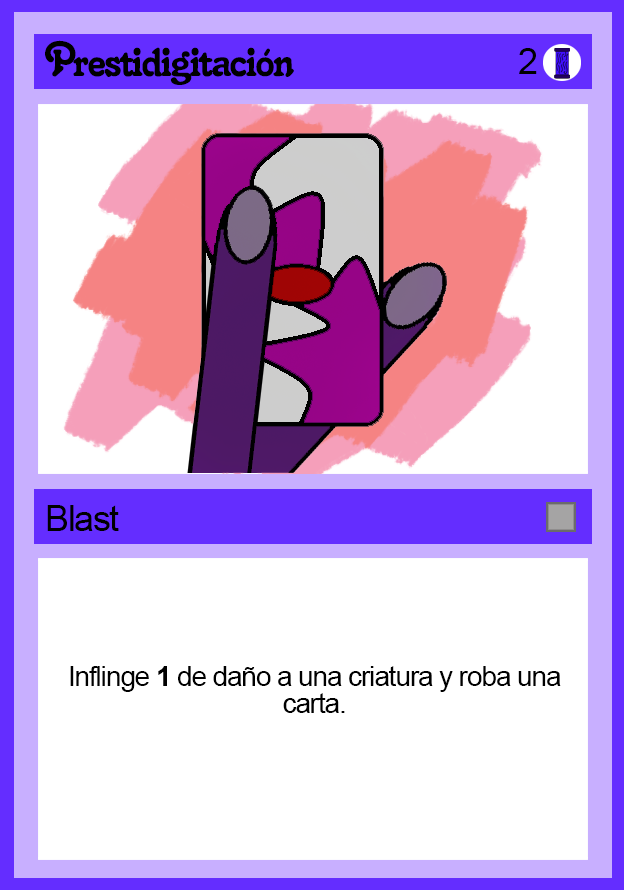
<style>
.page{position:relative;width:624px;height:890px;background:#ffffff}
.page>*{position:absolute;margin:0}
.t1{font:48px "Salina";letter-spacing:-0.04em;color:#000000}
.t2{font:36px "ArialMT";letter-spacing:-0.04em;color:#000000}
.t3{font:28px "ArialMT";letter-spacing:-0.04em;color:#000000}
.t4{font:28px "Arial-BoldMT";letter-spacing:-0.04em;color:#000000}
</style>
<div class="page">
<p class="t1" style="left:45px;top:40px;width:249px;height:45px">Prestidigitación</p>
<p class="t2" style="left:519px;top:48px;width:18px;height:26px">2</p>
<p class="t2" style="left:47px;top:505px;width:72px;height:26px">Blast</p>
<p class="t3" style="left:70px;top:666px;width:491px;height:47px">Inflinge <span class="t4">1</span> de daño a una criatura y roba una carta.</p>
</div>
